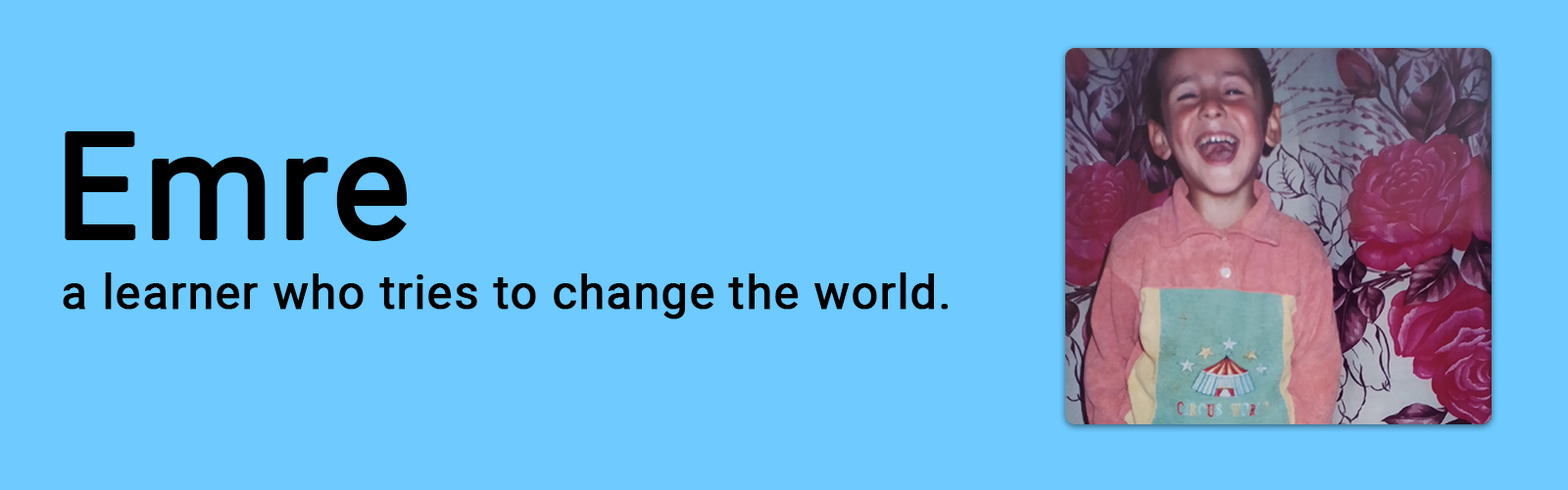
<style>
.page{position:relative;width:1568px;height:490px;background:#6ecaff}
.page>*{position:absolute;margin:0}
.t1{font:147px "Roboto-Regular";letter-spacing:0.01em;color:#000000;font-weight:bold}
.t2{font:47px "Roboto-Regular";letter-spacing:0.01em;color:#000000;font-weight:bold}
</style>
<div class="page">
<p class="t1" style="left:65px;top:130px;width:343px;height:112px">Emre</p>
<p class="t2" style="left:63px;top:272px;width:886px;height:47px">a learner who tries to change the world.</p>
</div>
